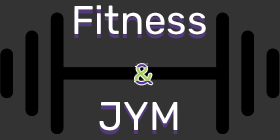
<style>
.page{position:relative;width:280px;height:140px;background:#333333}
.page>*{position:absolute;margin:0}
.t1{font:40px "Rubik-Regular";color:#ffffff}
</style>
<div class="page">
<p class="t1" style="left:74px;top:5px;width:132px;height:126px;text-align:center">Fitness<br> <br>JYM</p>
</div>
